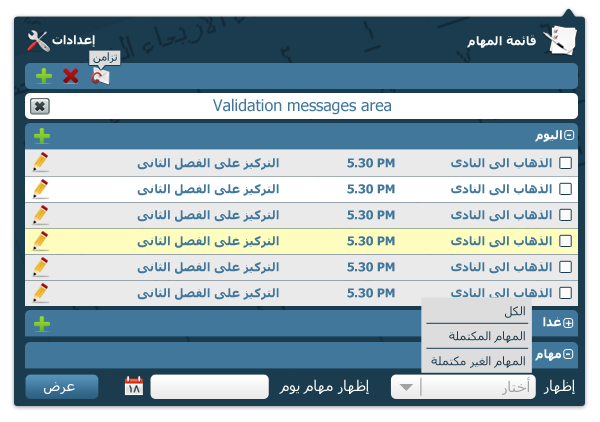
<style>
.page{position:relative;width:600px;height:422px}
.page>*{position:absolute;margin:0}
.t1{font:12px "Tahoma-Bold";color:#ffffff}
.t2{font:11.2px "Tahoma";color:#1b3c4f}
.t3{font:16px "Tahoma";color:#41779b}
.t4{font:12px "Tahoma-Bold";color:#41779b}
.t5{font:12px "Tahoma";color:#1b3c4f}
.t6{font:9.3px "Tahoma-Bold";color:#ffffff}
.t7{font:12px "Tahoma-Bold"}
.t8{font:14.7px "Tahoma";color:#a2a2a2}
.t9{font:14.7px "Tahoma";color:#ffffff}
</style>
<div class="page">
<p class="t1" style="left:52px;top:35px;width:43px;height:12px">إعدادات</p>
<p class="t1" style="left:467px;top:35px;width:69px;height:13px">قائمة المهام</p>
<p class="t2" style="left:93px;top:52px;width:24px;height:11px">تزامن</p>
<p class="t3" style="left:213px;top:98px;width:178px;height:17px">Validation messages area</p>
<p class="t1" style="left:535px;top:130px;width:36px;height:12px">- اليوم</p>
<p class="t4" style="left:137px;top:158px;width:142px;height:12px">التركيز على الفصل الثانى</p>
<p class="t4" style="left:347px;top:158px;width:48px;height:10px">5.30 PM</p>
<p class="t4" style="left:451px;top:158px;width:101px;height:12px">الذهاب الى النادى</p>
<p class="t4" style="left:137px;top:184px;width:142px;height:12px">التركيز على الفصل الثانى</p>
<p class="t4" style="left:347px;top:184px;width:48px;height:10px">5.30 PM</p>
<p class="t4" style="left:451px;top:184px;width:101px;height:12px">الذهاب الى النادى</p>
<p class="t4" style="left:137px;top:210px;width:142px;height:12px">التركيز على الفصل الثانى</p>
<p class="t4" style="left:347px;top:210px;width:48px;height:10px">5.30 PM</p>
<p class="t4" style="left:451px;top:210px;width:101px;height:12px">الذهاب الى النادى</p>
<p class="t4" style="left:137px;top:236px;width:142px;height:12px">التركيز على الفصل الثانى</p>
<p class="t4" style="left:347px;top:236px;width:48px;height:10px">5.30 PM</p>
<p class="t4" style="left:451px;top:236px;width:101px;height:12px">الذهاب الى النادى</p>
<p class="t4" style="left:137px;top:262px;width:142px;height:12px">التركيز على الفصل الثانى</p>
<p class="t4" style="left:347px;top:262px;width:48px;height:10px">5.30 PM</p>
<p class="t4" style="left:451px;top:262px;width:101px;height:12px">الذهاب الى النادى</p>
<p class="t4" style="left:137px;top:288px;width:142px;height:12px">التركيز على الفصل الثانى</p>
<p class="t4" style="left:347px;top:288px;width:48px;height:10px">5.30 PM</p>
<p class="t4" style="left:451px;top:288px;width:101px;height:12px">الذهاب الى النادى</p>
<p class="t5" style="left:505px;top:306px;width:20px;height:12px">الكل</p>
<p class="t1" style="left:543px;top:317px;width:29px;height:10px"><span class="t6">+</span> غدا</p>
<p class="t5" style="left:449px;top:331px;width:76px;height:12px">المهام المكتملة</p>
<p class="t7" style="left:496px;top:349px;width:74px;height:12px">- مهام سابقة</p>
<p class="t5" style="left:431px;top:356px;width:94px;height:12px">المهام الغير مكتملة</p>
<p class="t8" style="left:502px;top:377px;width:28px;height:18px">أختار</p>
<p class="t9" style="left:44px;top:382px;width:31px;height:12px">عرض</p>
<p class="t9" style="left:279px;top:379px;width:90px;height:15px">إظهار مهام يوم</p>
<p class="t9" style="left:543px;top:379px;width:32px;height:15px">إظهار</p>
</div>
